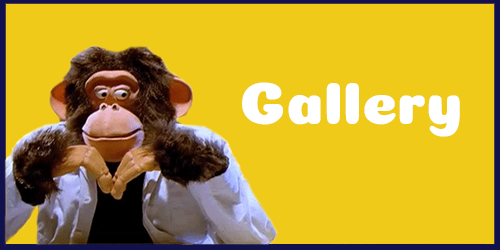
<style>
.page{position:relative;width:500px;height:250px;background:#f0ca19}
.page>*{position:absolute;margin:0}
.t1{font:60px "Coiny-Regular";color:#ffffff}
</style>
<div class="page">
<p class="t1" style="left:242px;top:82px;width:218px;height:55px">Gallery</p>
</div>
